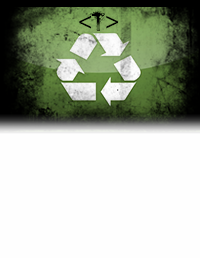
<style>
.page{position:relative;width:200px;height:258px;background:#fefefe}
.page>*{position:absolute;margin:0}
.t1{font:26.9px "AmericanTypewriter";color:#000000}
.t2{font:26.9px "trashco";color:#000000}
</style>
<div class="page">
<p class="t1" style="left:79px;top:15px;width:39px;height:14px">&lt;  &gt;</p>
<p class="t2" style="left:87px;top:10px;width:20px;height:21px">T</p>
</div>
